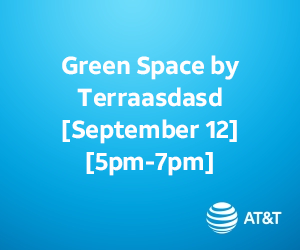
<style>
.page{position:relative;width:300px;height:250px}
.page>*{position:absolute;margin:0}
.t1{font:24.7px/32px "ATTAleckSans_Bold";letter-spacing:-0.01em;color:#fefefe}
</style>
<div class="page">
<p class="t1" style="left:62px;top:55px;width:178px;height:121px;text-align:center">Green Space by Terraasdasd<br>[September 12]<br>[5pm-7pm]</p>
</div>
